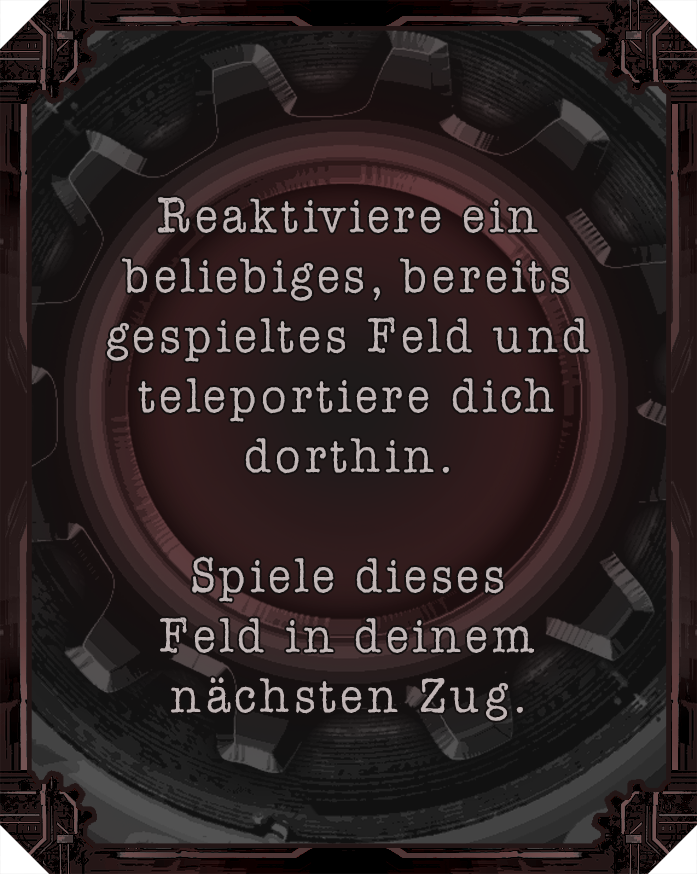
<style>
.page{position:relative;width:697px;height:874px}
.page>*{position:absolute;margin:0}
.t1{font:50px "AmerTypewriterITCbyBT-Medium";letter-spacing:0.02em;color:#c0b5b5}
</style>
<div class="page">
<p class="t1" style="left:107px;top:197px;width:482px;height:524px;text-align:center">Reaktiviere ein beliebiges, bereits gespieltes Feld und teleportiere dich<br>dorthin.<br><br>Spiele dieses <br>Feld in deinem nächsten Zug.</p>
</div>
